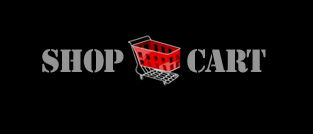
<style>
.page{position:relative;width:313px;height:134px;background:#000000}
.page>*{position:absolute;margin:0}
.t1{font:30px "StencilStd";letter-spacing:-0.04em;color:#949494}
</style>
<div class="page">
<p class="t1" style="left:42px;top:49px;width:224px;height:24px">SHOP       CART</p>
</div>
